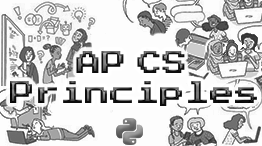
<style>
.page{position:relative;width:262px;height:146px;background:#fdfdfd}
.page>*{position:absolute;margin:0}
.t1{font:25px "PressStart2P-Regular"}
</style>
<div class="page">
<p class="t1" style="left:76px;top:51px;width:109px;height:22px">AP CS</p>
<p class="t1" style="left:10px;top:81px;width:247px;height:25px">Principles</p>
</div>
